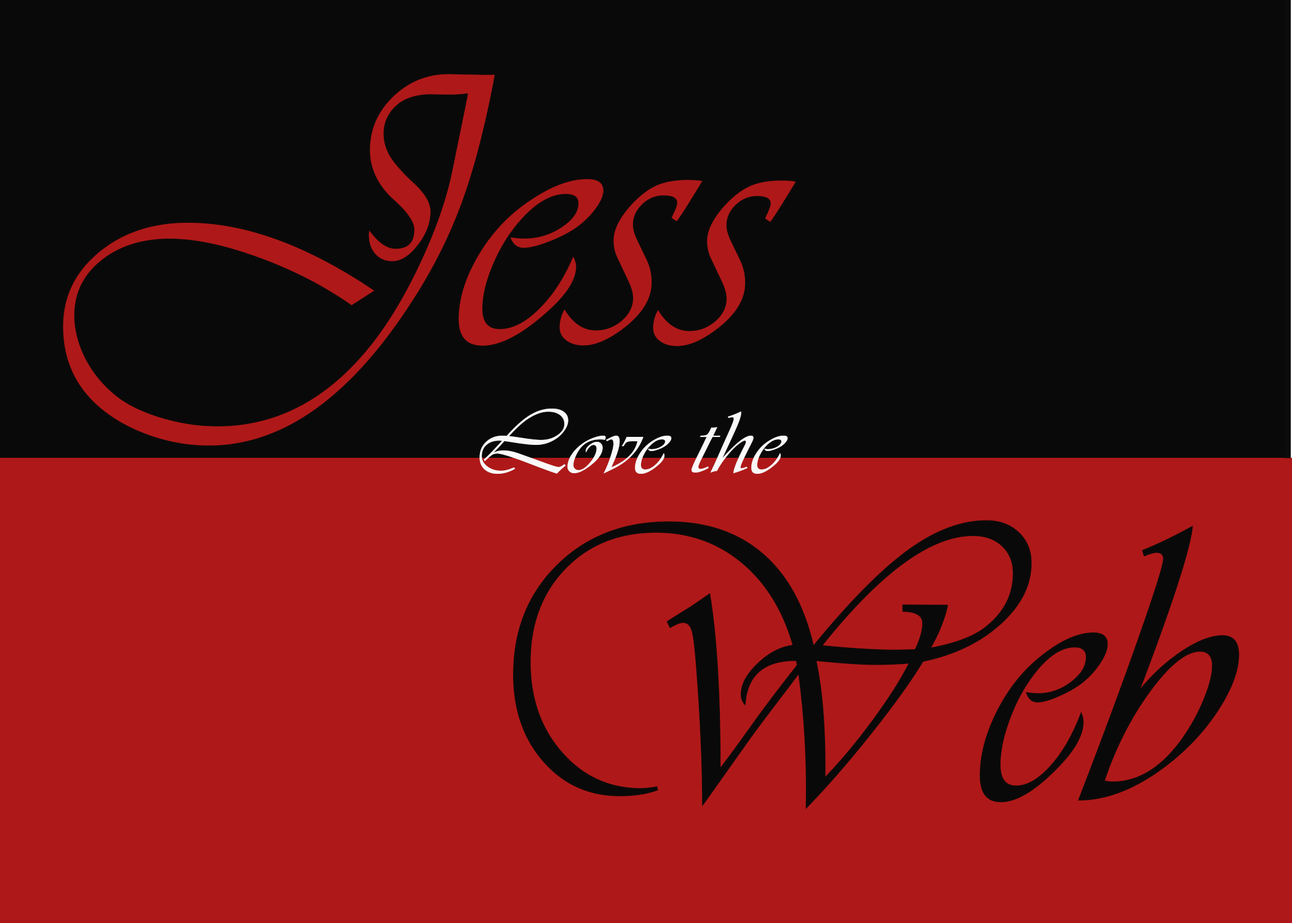
<style>
.page{position:relative;width:1292px;height:923px;background:#090909}
.page>*{position:absolute;margin:0}
.t1{font:402px "Vivaldii";color:#af1818;scale:1.03 1}
.t2{font:92.2px "Vivaldii";color:#faf8f8;scale:1.13 1}
.t3{font:410.2px "Vivaldii";color:#090909;scale:0.89 1}
</style>
<div class="page">
<p class="t1" style="left:63px;top:74px;width:733px;height:371px">Jess</p>
<p class="t2" style="left:479px;top:409px;width:309px;height:65px">Love the</p>
<p class="t3" style="left:513px;top:520px;width:726px;height:289px">Web</p>
</div>
